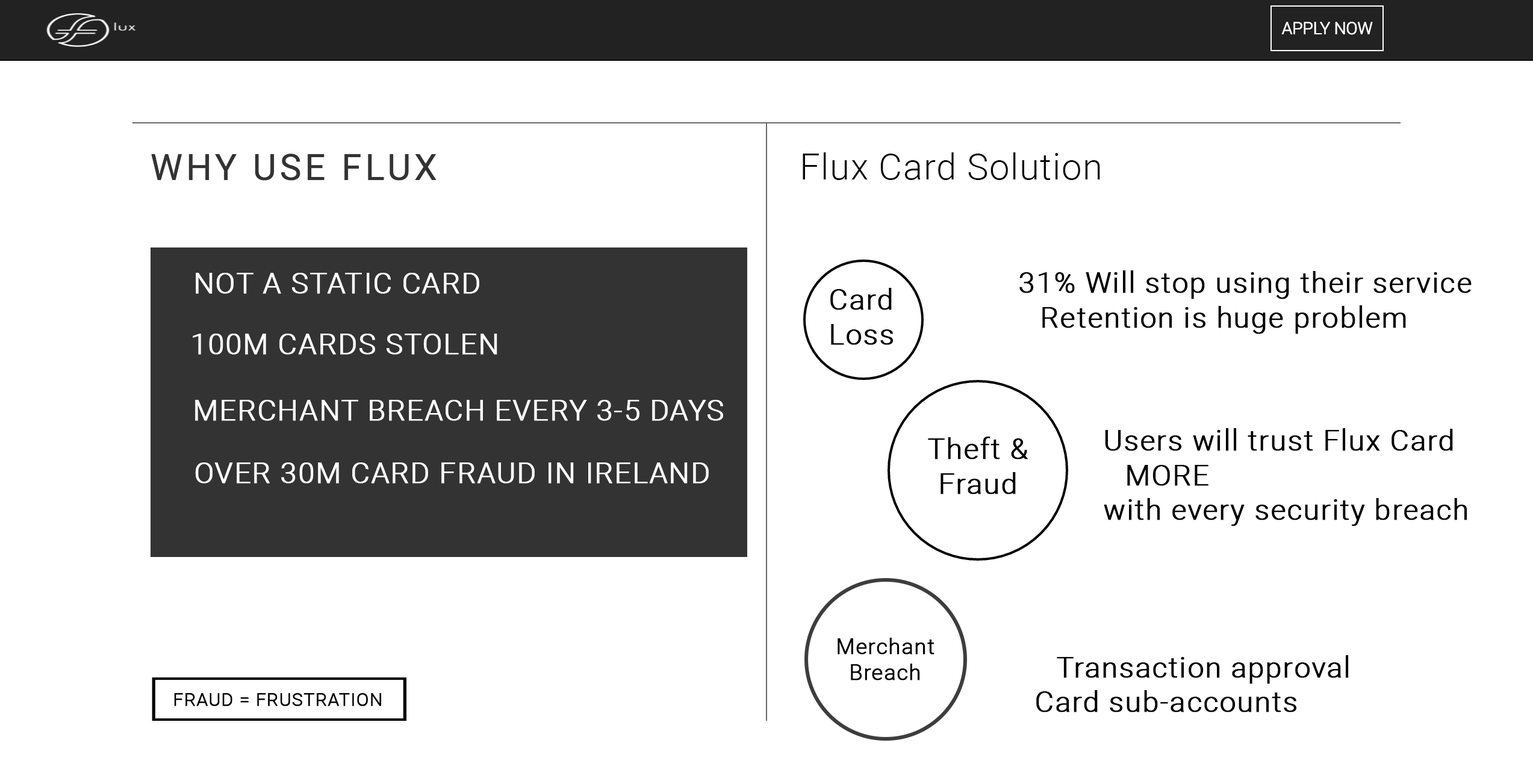
<style>
.page{position:relative;width:1533px;height:778px;background:#ffffff}
.page>*{position:absolute;margin:0}
.t1{font:36.1px "Roboto-Light";letter-spacing:0.025em;color:#070707}
.t2{font:28.9px "Roboto-Light";letter-spacing:0.025em;color:#ffffff;font-weight:bold}
.t3{font:28.9px "Roboto-Light";letter-spacing:0.025em;color:#000000;font-weight:bold}
.t4{font:21.7px "Roboto-Light";letter-spacing:0.025em;color:#000000;font-weight:bold}
.t5{font:18.1px "Roboto-Light";letter-spacing:0.025em;color:#000000;font-weight:bold}
</style>
<div class="page">
<p class="t1" style="left:803px;top:152px;width:297px;height:28px">Flux Card Solution</p>
<p class="t2" style="left:196px;top:273px;width:283px;height:21px">NOT A STATIC CARD</p>
<p class="t3" style="left:1019px;top:270px;width:452px;height:64px">31% Will stop using their service<br> Retention is huge problem</p>
<p class="t3" style="left:830px;top:288px;width:63px;height:57px">Card <br>Loss</p>
<p class="t2" style="left:193px;top:334px;width:304px;height:21px">100M CARDS STOLEN</p>
<p class="t2" style="left:195px;top:400px;width:528px;height:21px">MERCHANT BREACH EVERY 3-5 DAYS</p>
<p class="t3" style="left:928px;top:437px;width:100px;height:57px;text-align:center">Theft &amp;<br>Fraud</p>
<p class="t3" style="left:1104px;top:428px;width:363px;height:98px">Users will trust Flux Card <br> MORE<br>with every security breach</p>
<p class="t2" style="left:195px;top:462px;width:514px;height:21px">OVER 30M CARD FRAUD IN IRELAND</p>
<p class="t4" style="left:837px;top:638px;width:97px;height:42px;text-align:center">Merchant<br>Breach</p>
<p class="t3" style="left:1036px;top:655px;width:313px;height:57px">Transaction approval<br>Card sub-accounts</p>
<p class="t5" style="left:174px;top:693px;width:208px;height:13px">FRAUD = FRUSTRATION</p>
</div>
